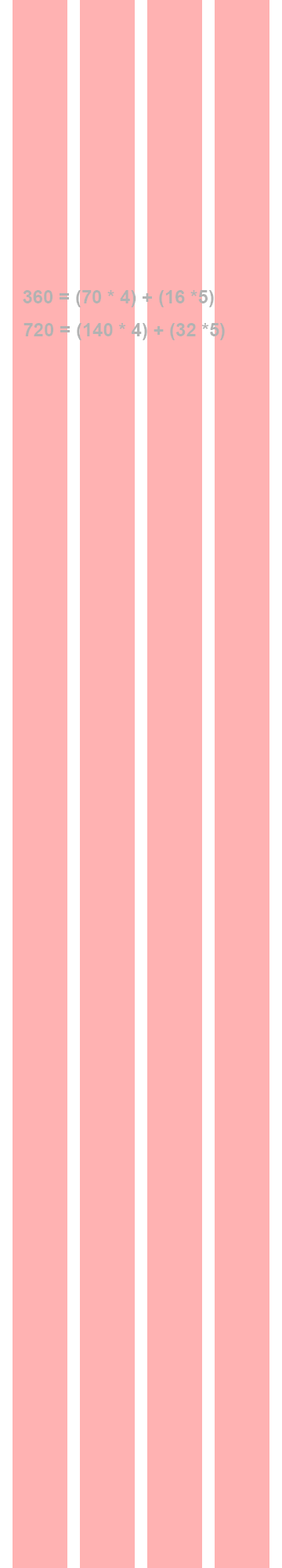
<style>
.page{position:relative;width:282px;height:1568px;background:#ffb2b2}
.page>*{position:absolute;margin:0}
.t1{font:18.8px "Arial-BoldMT";color:#b2b2b2}
</style>
<div class="page">
<p class="t1" style="left:23px;top:290px;width:191px;height:17px">360 = (70 * 4) + (16 *5)</p>
<p class="t1" style="left:24px;top:323px;width:201px;height:17px">720 = (140 * 4) + (32 *5)</p>
</div>
